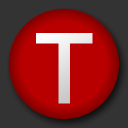
<style>
.page{position:relative;width:128px;height:128px;background:#333333}
.page>*{position:absolute;margin:0}
.t1{font:95.1px "ArialMT";color:#ffffff;font-weight:bold}
</style>
<div class="page">
<p class="t1" style="left:36px;top:33px;width:57px;height:71px">T</p>
</div>
